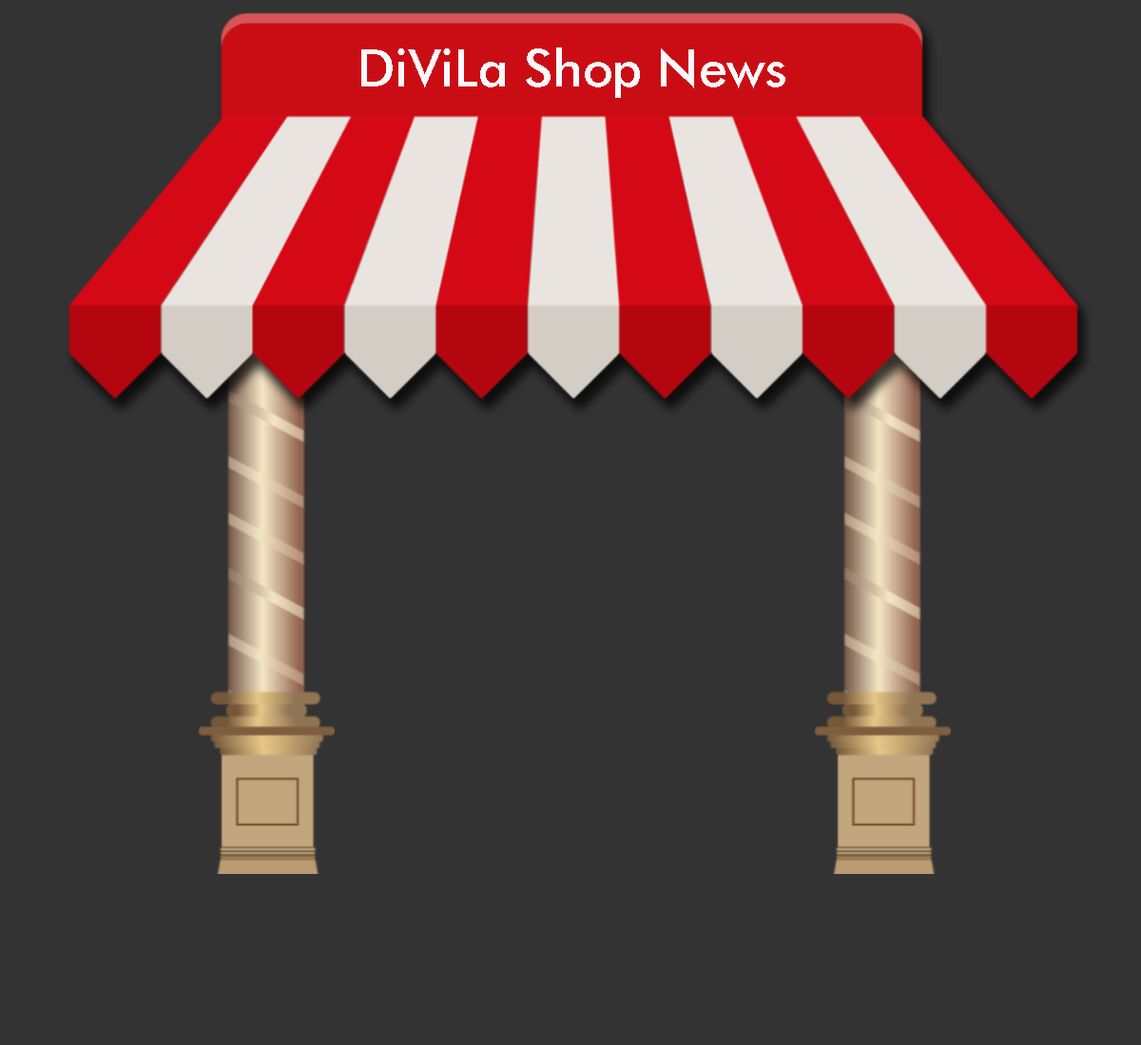
<style>
.page{position:relative;width:1141px;height:1045px;background:#333333}
.page>*{position:absolute;margin:0}
.t1{font:51.7px "VNIFuturMed";color:#f9f9fc}
</style>
<div class="page">
<p class="t1" style="left:361px;top:48px;width:424px;height:50px">DiViLa Shop News</p>
</div>
